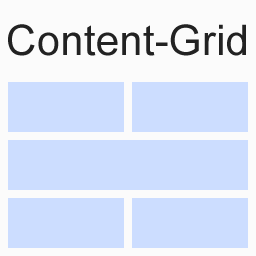
<style>
.page{position:relative;width:256px;height:256px;background:#ccddff}
.page>*{position:absolute;margin:0}
.t1{font:42px "ArialMT";letter-spacing:0.005em;color:#222222}
</style>
<div class="page">
<p class="t1" style="left:8px;top:24px;width:238px;height:32px">Content-Grid</p>
</div>
